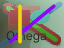
<style>
.page{position:relative;width:64px;height:48px}
.page>*{position:absolute;margin:0}
.t1{font:12px "Inter-Regular";color:#000000}
</style>
<div class="page">
<p class="t1" style="left:5px;top:31px;width:42px;height:13px">Omega</p>
</div>
